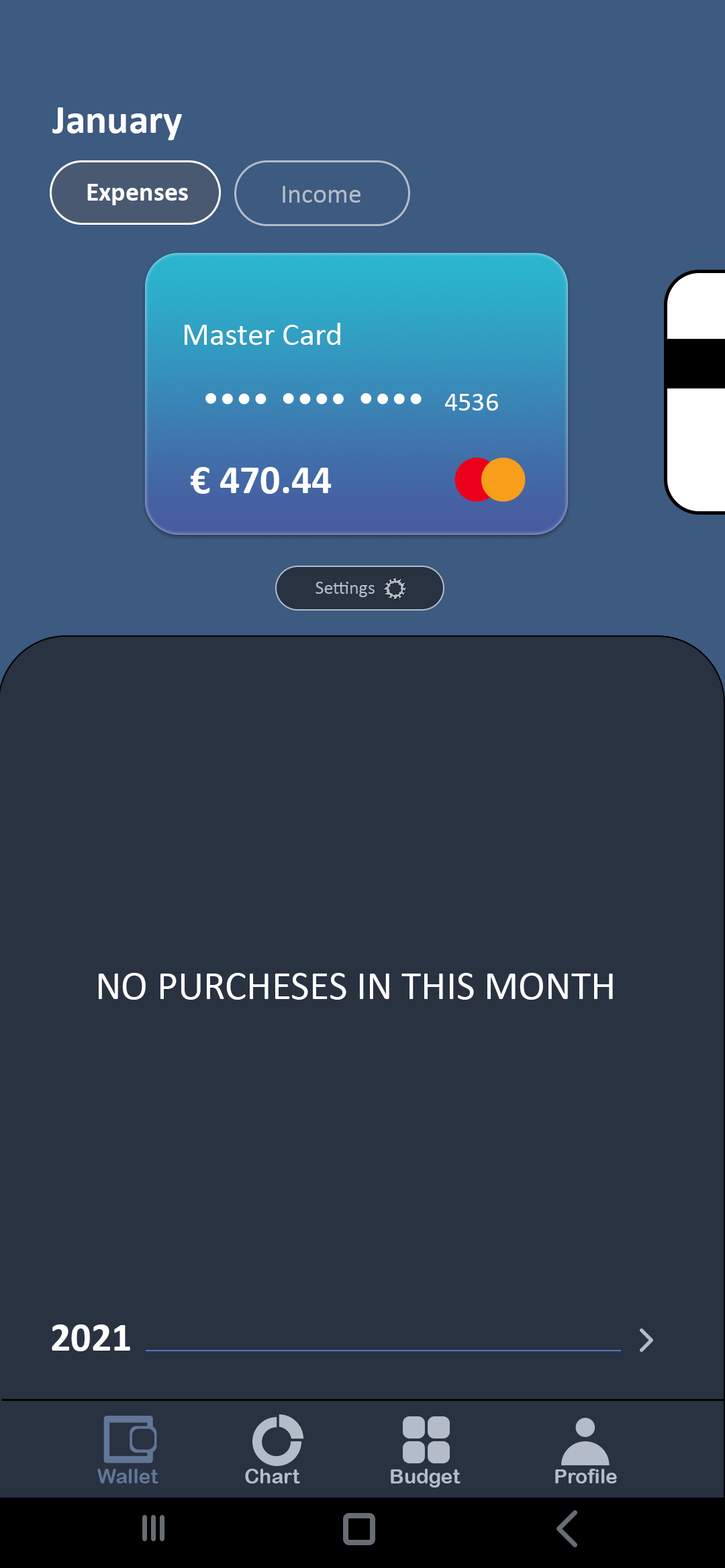
<style>
.page{position:relative;width:725px;height:1568px;background:#293241}
.page>*{position:absolute;margin:0}
.t1{font:40.3px "Calibri-Bold";color:#ffffff}
.t2{font:26.8px "Calibri-Bold";color:#ffffff}
.t3{font:26.8px "Calibri";color:#b4bcc9}
.t4{font:32.2px "Calibri";color:#ffffff}
.t5{font:26.8px "Calibri";color:#ffffff}
.t6{font:18.8px "Calibri";color:#b4bcc9}
.t7{font:40.3px "Calibri";color:#ffffff}
.t8{font:20.1px "ArialRoundedMTBold";color:#617698}
.t9{font:20.1px "ArialRoundedMTBold";color:#b4bcc9}
</style>
<div class="page">
<p class="t1" style="left:52px;top:107px;width:130px;height:33px">January</p>
<p class="t2" style="left:87px;top:184px;width:101px;height:21px">Expenses</p>
<p class="t3" style="left:282px;top:186px;width:78px;height:17px">Income</p>
<p class="t4" style="left:185px;top:323px;width:155px;height:22px">Master Card</p>
<p class="t5" style="left:444px;top:394px;width:54px;height:17px">4536</p>
<p class="t1" style="left:190px;top:467px;width:141px;height:27px">€ 470.44</p>
<p class="t6" style="left:315px;top:582px;width:59px;height:15px">Settings</p>
<p class="t7" style="left:99px;top:973px;width:514px;height:27px">NO PURCHESES IN THIS MONTH</p>
<p class="t1" style="left:52px;top:1324px;width:78px;height:27px">2021</p>
<p class="t8" style="left:97px;top:1469px;width:61px;height:14px">Wallet</p>
<p class="t9" style="left:245px;top:1469px;width:55px;height:14px">Chart</p>
<p class="t9" style="left:390px;top:1469px;width:70px;height:18px">Budget</p>
<p class="t9" style="left:555px;top:1469px;width:62px;height:14px">Profile</p>
</div>
